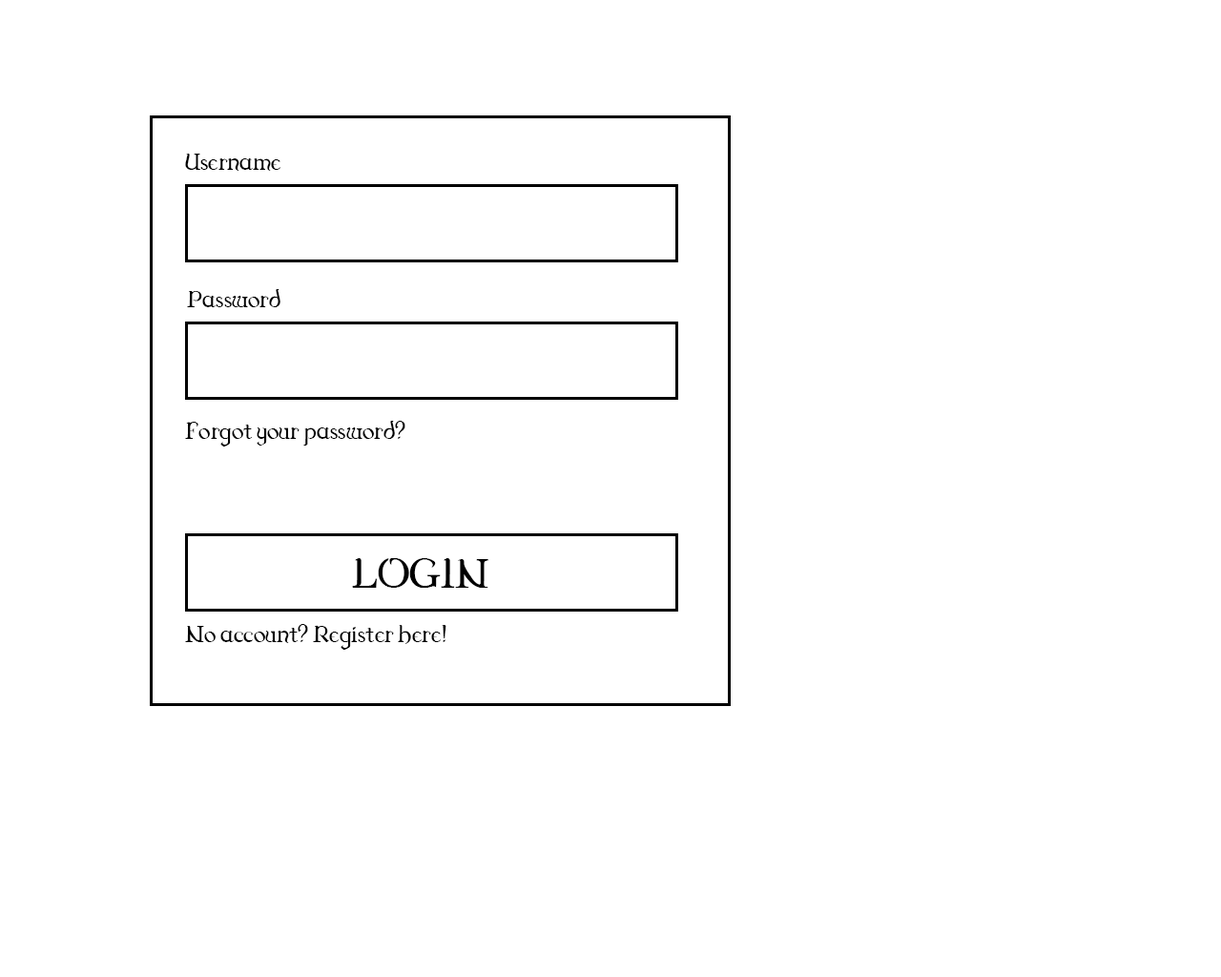
<style>
.page{position:relative;width:1221px;height:977px;background:#ffffff}
.page>*{position:absolute;margin:0}
.t1{font:34.3px "Dungeon";color:#000000}
.t2{font:60.6px "Dungeon";color:#000000}
</style>
<div class="page">
<p class="t1" style="left:185px;top:154px;width:96px;height:17px">Username</p>
<p class="t1" style="left:187px;top:289px;width:93px;height:18px">Password</p>
<p class="t1" style="left:185px;top:421px;width:220px;height:25px">Forgot your password?</p>
<p class="t2" style="left:352px;top:558px;width:136px;height:30px">LOGIN</p>
<p class="t1" style="left:185px;top:624px;width:261px;height:26px">No account? Register here!</p>
</div>
